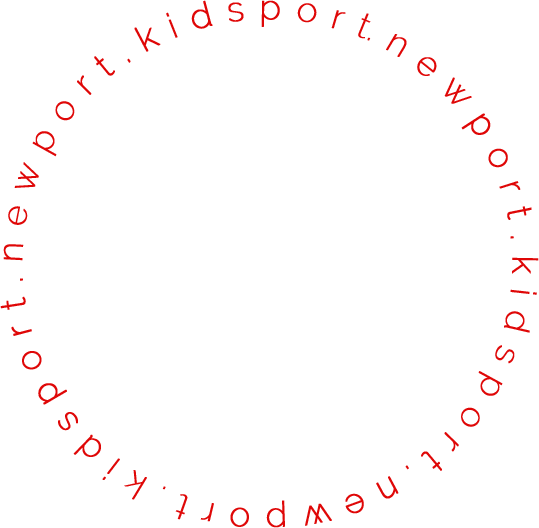
<style>
.page{position:relative;width:539px;height:528px;background:#ffffff}
.page>*{position:absolute;margin:0}
.t1{font:35px/11px "Raleway-ExtraLight";color:#df0707;font-weight:bold}
</style>
<div class="page">
<p class="t1" style="left:0px;top:0px;width:539px;height:528px;text-align:justify">.newport.kidsport.newport.kidsport.newport.kidsport</p>
</div>
